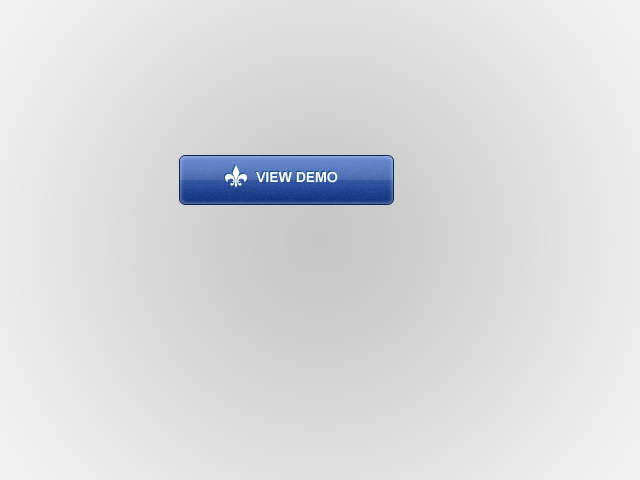
<style>
.page{position:relative;width:640px;height:480px}
.page>*{position:absolute;margin:0}
.t1{font:14px "Arial-BoldMT";color:#ffffff}
</style>
<div class="page">
<p class="t1" style="left:256px;top:171px;width:82px;height:12px">VIEW DEMO</p>
</div>
